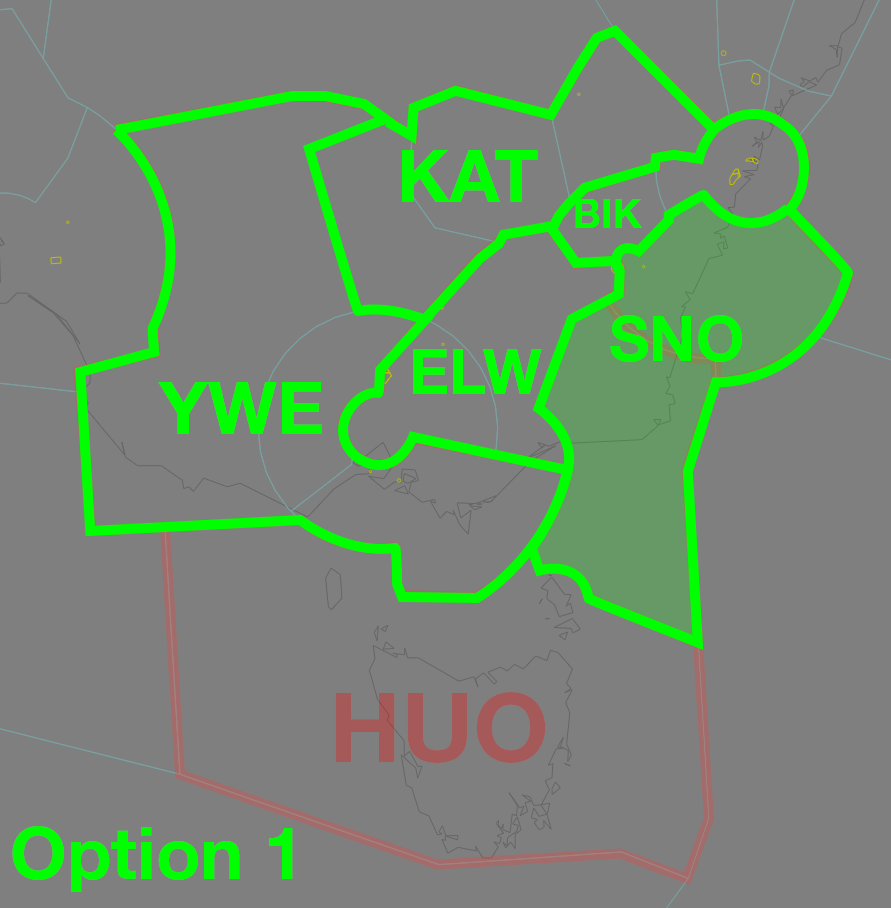
<style>
.page{position:relative;width:891px;height:908px;background:#7f7f7f}
.page>*{position:absolute;margin:0}
.t1{font:72.5px "HelveticaNeueLTStd-Bd";color:#00ff00}
.t2{font:40.1px "HelveticaNeueLTStd-Bd";color:#00ff00}
.t3{font:63px "HelveticaNeueLTStd-Bd";color:#00ff00}
.t4{font:97.3px "HelveticaNeueLTStd-Bd";color:#a65959}
</style>
<div class="page">
<p class="t1" style="left:402px;top:150px;width:136px;height:52px">KAT</p>
<p class="t2" style="left:575px;top:199px;width:67px;height:29px">BIK</p>
<p class="t3" style="left:610px;top:315px;width:132px;height:47px">SNO</p>
<p class="t3" style="left:413px;top:349px;width:129px;height:45px">ELW</p>
<p class="t1" style="left:158px;top:382px;width:164px;height:52px">YWE</p>
<p class="t4" style="left:335px;top:692px;width:211px;height:71px">HUO</p>
<p class="t1" style="left:12px;top:826px;width:281px;height:66px">Option 1</p>
</div>
